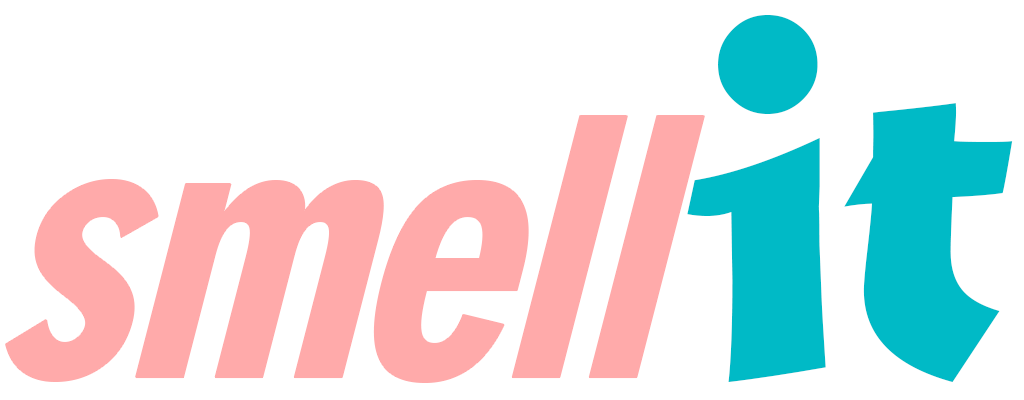
<style>
.page{position:relative;width:1024px;height:400px;background:#ffffff}
.page>*{position:absolute;margin:0}
.t1{font:555.6px "MaturaMTScriptCapitals";letter-spacing:-0.04em;color:#00bac6}
.t2{font:352.7px "Geometric706BT-BlackCondensedB";letter-spacing:-0.04em;color:#ffaaaa;scale:0.97 1}
</style>
<div class="page">
<p class="t1" style="left:687px;top:15px;width:326px;height:367px">it</p>
<p class="t2" style="left:6px;top:116px;width:698px;height:266px">smell</p>
</div>
